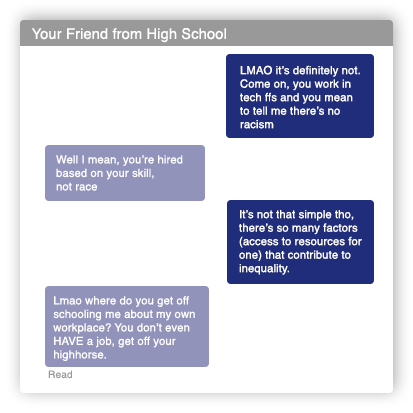
<style>
.page{position:relative;width:413px;height:413px;background:#ffffff}
.page>*{position:absolute;margin:0}
.t1{font:14.6px "Helvetica";letter-spacing:0.01em;color:#ffffff}
.t2{font:11.2px "Helvetica";letter-spacing:0.01em;color:#ffffff}
.t3{font:10.1px "Helvetica";letter-spacing:0.01em;color:#999999}
</style>
<div class="page">
<p class="t1" style="left:31px;top:28px;width:195px;height:15px">Your Friend from High School</p>
<p class="t2" style="left:240px;top:65px;width:120px;height:64px">LMAO it’s definitely not.<br>Come on, you work in<br>tech ffs and you mean<br>to tell me there’s no<br>racism</p>
<p class="t2" style="left:56px;top:155px;width:127px;height:36px">Well I mean, you’re hired<br>based on your skill, <br>not race</p>
<p class="t2" style="left:239px;top:210px;width:123px;height:65px">It’s not that simple tho,<br>there’s so many factors<br>(access to resources for<br>one) that contribute to<br>inequality.</p>
<p class="t2" style="left:53px;top:296px;width:142px;height:65px">Lmao where do you get off<br>schooling me about my own<br>workplace? You don’t even<br>HAVE a job, get off your<br>highhorse.</p>
<p class="t3" style="left:48px;top:370px;width:24px;height:9px">Read</p>
</div>
